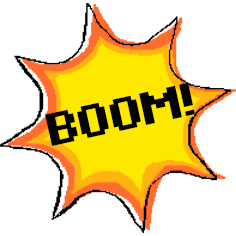
<style>
.page{position:relative;width:236px;height:236px;background:#ffffff}
.page>*{position:absolute;margin:0}
.t1{font:41.3px "PixeloidSans-Bold";color:#000000}
</style>
<div class="page">
<p class="t1" style="left:45px;top:82px;width:150px;height:64px;rotate:-12deg">BOOM!</p>
</div>
